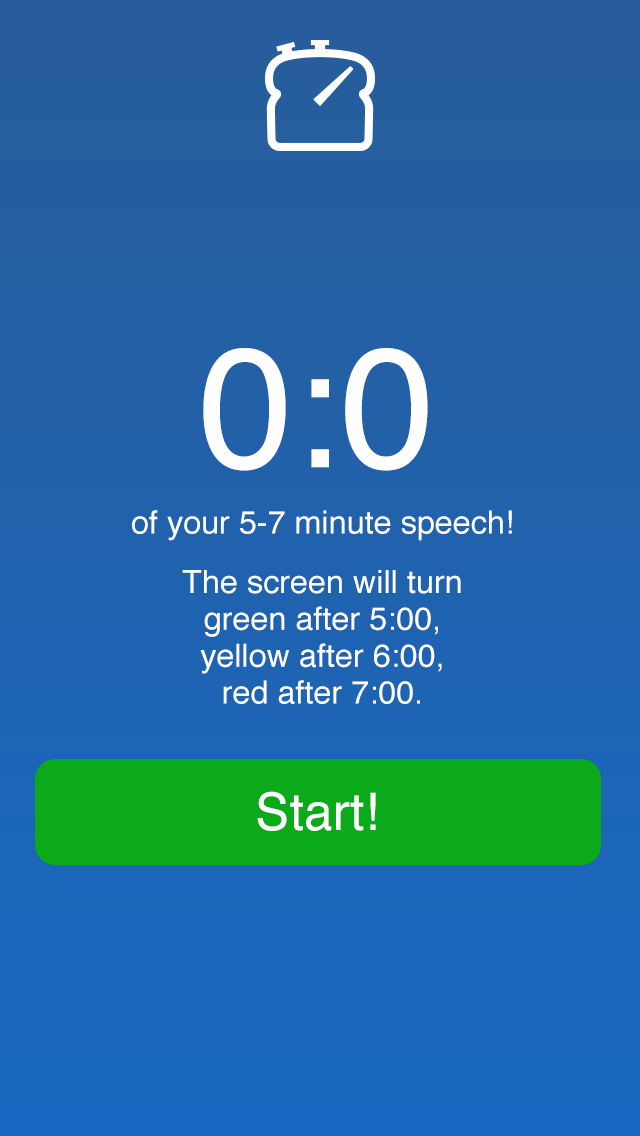
<style>
.page{position:relative;width:640px;height:1136px}
.page>*{position:absolute;margin:0}
.t1{font:170.2px "Helvetica";color:#ffffff}
.t2{font:32.1px "Helvetica";color:#ffffff}
.t3{font:32.1px/36.9px "Helvetica";color:#ffffff}
.t4{font:32.1px/59.3px "Helvetica";color:#ffffff}
.t5{font:51.8px "Helvetica";color:#ffffff}
</style>
<div class="page">
<p class="t1" style="left:203px;top:348px;width:225px;height:123px">0:0</p>
<p class="t2" style="left:132px;top:510px;width:380px;height:31px">of your 5-7 minute speech!</p>
<p class="t2" style="left:132px;top:510px;width:380px;height:31px">of your 5-7 minute speech!</p>
<p class="t2" style="left:132px;top:510px;width:380px;height:31px">of your 5-7 minute speech!</p>
<p class="t2" style="left:132px;top:510px;width:380px;height:31px">of your 5-7 minute speech!</p>
<p class="t3" style="left:132px;top:510px;width:380px;height:194px;text-align:center"><span class="t4">of your 5-7 minute speech!<br>The screen will turn</span><br>green after 5:00,<br>yellow after 6:00,<br>red after 7:00.</p>
<p class="t5" style="left:257px;top:791px;width:119px;height:40px">Start!</p>
</div>
